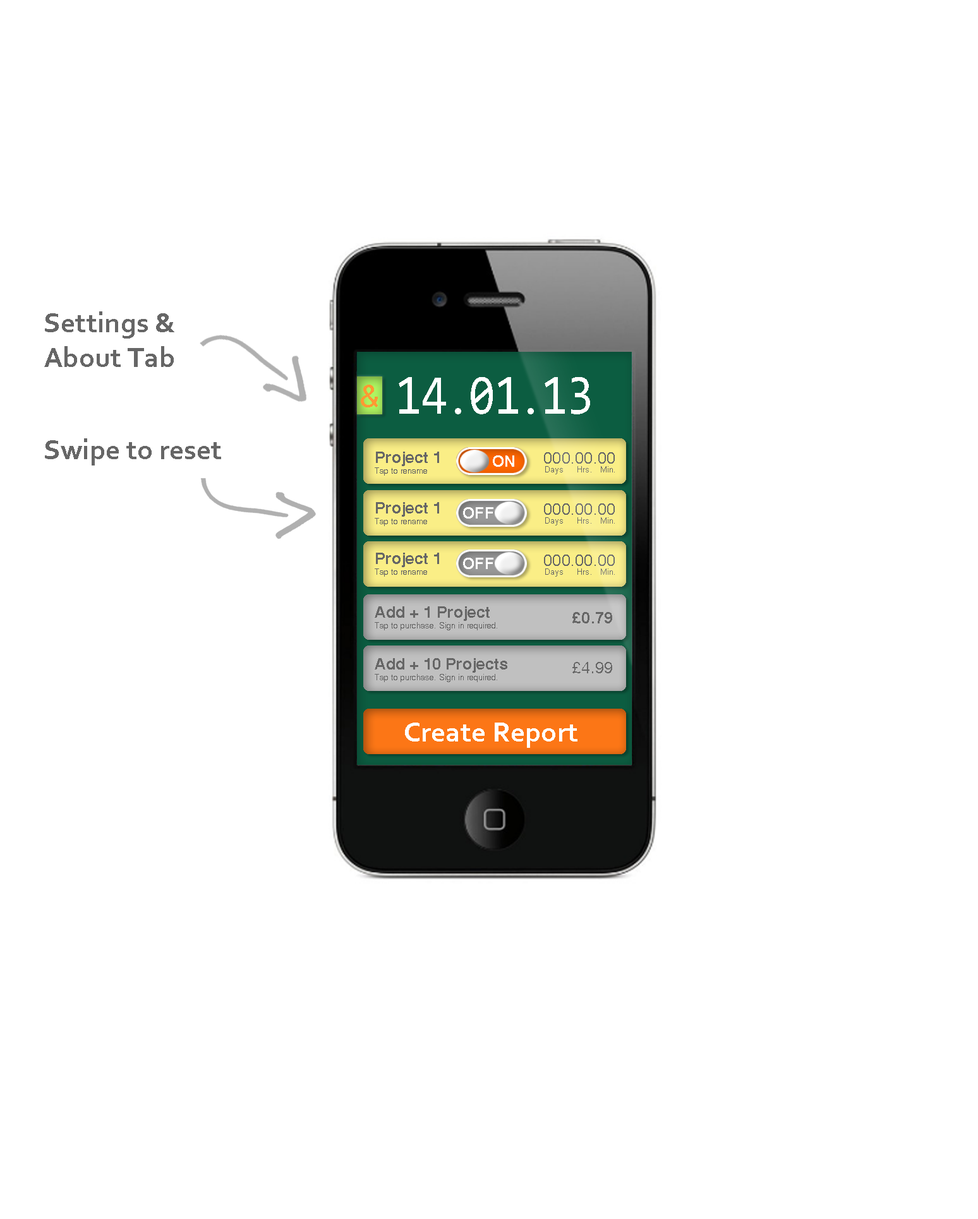
<style>
.page{position:relative;width:978px;height:1219px;background:#ffffff}
.page>*{position:absolute;margin:0}
.t1{font:29px "Corbel-Bold";color:#666666}
.t2{font:56.9px "Consolas";color:#ffffff;scale:0.83 1}
.t3{font:37.9px "Consolas";color:#ffffff}
.t4{font:29px "Mangal";color:#ff9933}
.t5{font:7.9px/10.5px "SansSerif";color:#666666}
.t6{font:15.8px/10.5px "SansSerifBold";color:#666666}
.t7{font:15.8px "Arial-BoldMT";letter-spacing:0.01em;color:#ffffff}
.t8{font:15.8px "ArialMT";letter-spacing:0.01em;color:#666666}
.t9{font:7.9px "ArialMT";letter-spacing:0.01em;color:#666666}
.t10{font:15.8px "Arial-BoldMT";letter-spacing:0.01em;color:#666666}
.t11{font:15.8px "SansSerif";letter-spacing:0.01em;color:#666666}
.t12{font:29px "Corbel-Bold";color:#ffffff}
</style>
<div class="page">
<p class="t1" style="left:44px;top:311px;width:130px;height:56px">Settings &amp;<br>About Tab</p>
<p class="t2" style="left:399px;top:377px;width:191px;height:37px">14<span class="t3">.</span>01<span class="t3">.</span>13</p>
<p class="t4" style="left:361px;top:385px;width:17px;height:22px">&amp;</p>
<p class="t1" style="left:45px;top:438px;width:176px;height:28px">Swipe to reset</p>
<p class="t5" style="left:375px;top:452px;width:64px;height:24px"><span class="t6">Project 1<br></span>Tap to rename</p>
<p class="t7" style="left:493px;top:455px;width:21px;height:12px">ON</p>
<p class="t8" style="left:544px;top:452px;width:71px;height:12px">000.00.00</p>
<p class="t9" style="left:545px;top:466px;width:70px;height:8px">Days     Hrs.   Min.</p>
<p class="t5" style="left:375px;top:502px;width:64px;height:24px"><span class="t6">Project 1<br></span>Tap to rename</p>
<p class="t7" style="left:463px;top:507px;width:30px;height:12px">OFF</p>
<p class="t8" style="left:544px;top:504px;width:71px;height:11px">000.00.00</p>
<p class="t9" style="left:545px;top:517px;width:70px;height:9px">Days     Hrs.   Min.</p>
<p class="t5" style="left:375px;top:553px;width:64px;height:24px"><span class="t6">Project 1<br></span>Tap to rename</p>
<p class="t7" style="left:463px;top:558px;width:30px;height:11px">OFF</p>
<p class="t8" style="left:544px;top:555px;width:71px;height:11px">000.00.00</p>
<p class="t9" style="left:545px;top:569px;width:70px;height:8px">Days     Hrs.   Min.</p>
<p class="t5" style="left:375px;top:606px;width:122px;height:24px"><span class="t6">Add + 1 Project<br></span>Tap to purchase. Sign in required.</p>
<p class="t10" style="left:572px;top:612px;width:40px;height:12px">£0.79</p>
<p class="t5" style="left:375px;top:658px;width:132px;height:24px"><span class="t6">Add + 10 Projects<br></span>Tap to purchase. Sign in required.</p>
<p class="t11" style="left:572px;top:662px;width:40px;height:11px"><span class="t8">£</span>4.99</p>
<p class="t12" style="left:405px;top:723px;width:172px;height:25px">Create Report</p>
</div>
